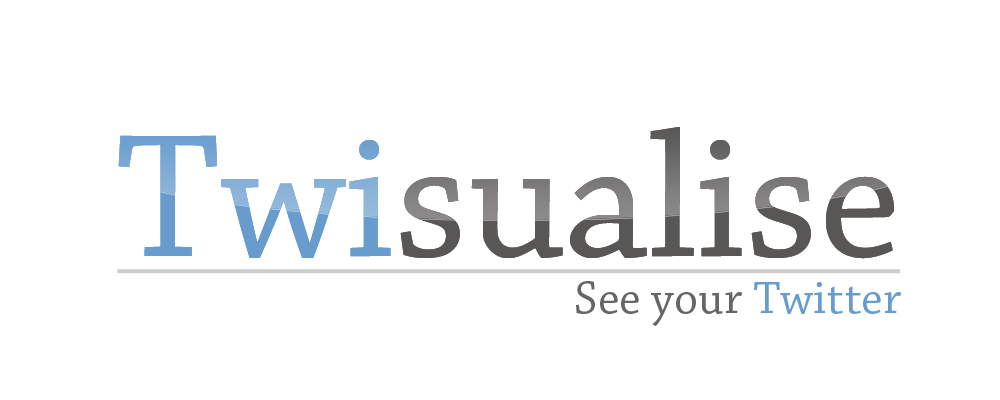
<style>
.page{position:relative;width:1000px;height:400px;background:#ffffff}
.page>*{position:absolute;margin:0}
.t1{font:184.2px "ChaparralPro-Regular";color:#595656}
.t2{font:184.2px "ChaparralPro-Regular";color:#679ccd}
.t3{font:48.5px "ChaparralPro-Regular";color:#666666}
.t4{font:48.5px "ChaparralPro-Regular";color:#679ccd}
</style>
<div class="page">
<p class="t1" style="left:118px;top:127px;width:776px;height:132px"><span class="t2">Twi</span>sualise</p>
<p class="t1" style="left:118px;top:127px;width:776px;height:132px"><span class="t2">Twi</span>sualise</p>
<p class="t3" style="left:576px;top:281px;width:326px;height:45px">See your <span class="t4">Twitter</span></p>
</div>
